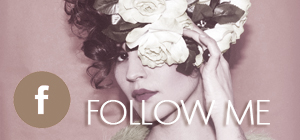
<style>
.page{position:relative;width:300px;height:140px}
.page>*{position:absolute;margin:0}
.t1{font:33.3px "Montreal-Xlight";color:#fefefe;text-transform:uppercase;font-weight:bold}
</style>
<div class="page">
<p class="t1" style="left:88px;top:100px;width:182px;height:25px">follow me</p>
</div>
